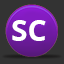
<style>
.page{position:relative;width:64px;height:64px;background:#333333}
.page>*{position:absolute;margin:0}
.t1{font:29.7px "OpenSans-Bold";color:#ffffff}
</style>
<div class="page">
<p class="t1" style="left:12px;top:20px;width:34px;height:21px">SC</p>
</div>
